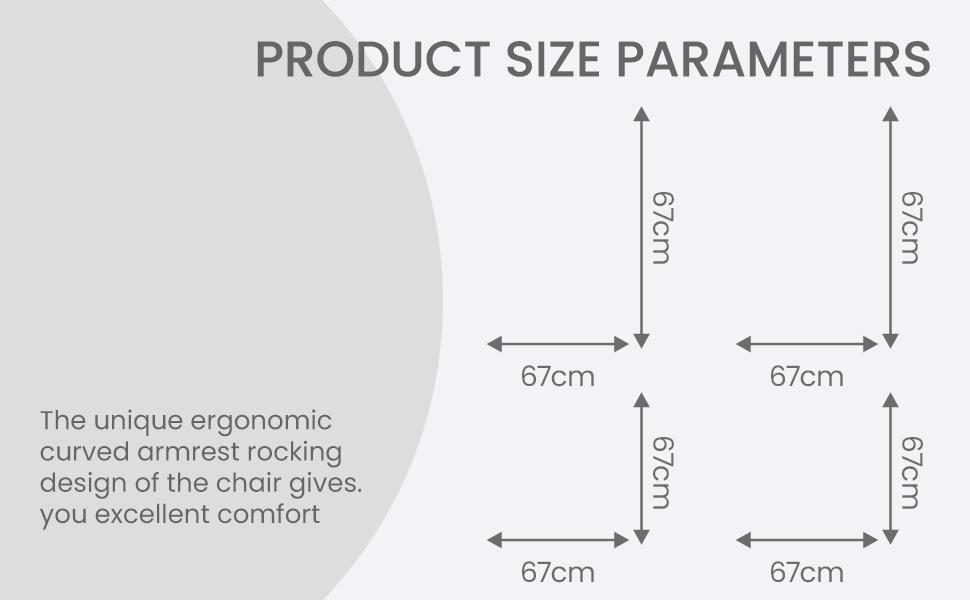
<style>
.page{position:relative;width:970px;height:600px;background:#f2f3f6}
.page>*{position:absolute;margin:0}
.t1{font:50px "Poppins-Medium";color:#666666}
.t2{font:28px "Poppins-Regular";color:#6c6c6c}
.t3{font:26px "Poppins-Regular";color:#666666}
</style>
<div class="page">
<p class="t1" style="left:257px;top:41px;width:673px;height:36px">PRODUCT SIZE PARAMETERS</p>
<p class="t2" style="left:653px;top:192px;width:21px;height:72px;rotate:90deg">67cm</p>
<p class="t2" style="left:902px;top:192px;width:21px;height:72px;rotate:90deg">67cm</p>
<p class="t2" style="left:522px;top:365px;width:72px;height:22px">67cm</p>
<p class="t2" style="left:771px;top:365px;width:72px;height:22px">67cm</p>
<p class="t3" style="left:39px;top:409px;width:323px;height:121px">The unique ergonomic<br>curved armrest rocking<br>design of the chair gives.<br>you excellent comfort</p>
<p class="t2" style="left:653px;top:437px;width:21px;height:72px;rotate:90deg">67cm</p>
<p class="t2" style="left:902px;top:437px;width:21px;height:72px;rotate:90deg">67cm</p>
<p class="t2" style="left:522px;top:561px;width:72px;height:22px">67cm</p>
<p class="t2" style="left:771px;top:561px;width:72px;height:22px">67cm</p>
</div>
